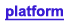
<style>
.page{position:relative;width:70px;height:25px;background:#ffffff}
.page>*{position:absolute;margin:0}
.t1{font:14.7px "Arial-BoldMT";color:#391bd4;text-decoration:underline}
</style>
<div class="page">
<p class="t1" style="left:5px;top:5px;width:59px;height:16px">platform</p>
</div>
